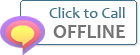
<style>
.page{position:relative;width:140px;height:55px;background:#ffffff}
.page>*{position:absolute;margin:0}
.t1{font:16px "Candara";color:#40738b}
.t2{font:20px "Candara-Bold";color:#737373}
</style>
<div class="page">
<p class="t1" style="left:49px;top:7px;width:76px;height:11px">Click to Call</p>
<p class="t2" style="left:53px;top:25px;width:72px;height:13px">OFFLINE</p>
</div>
